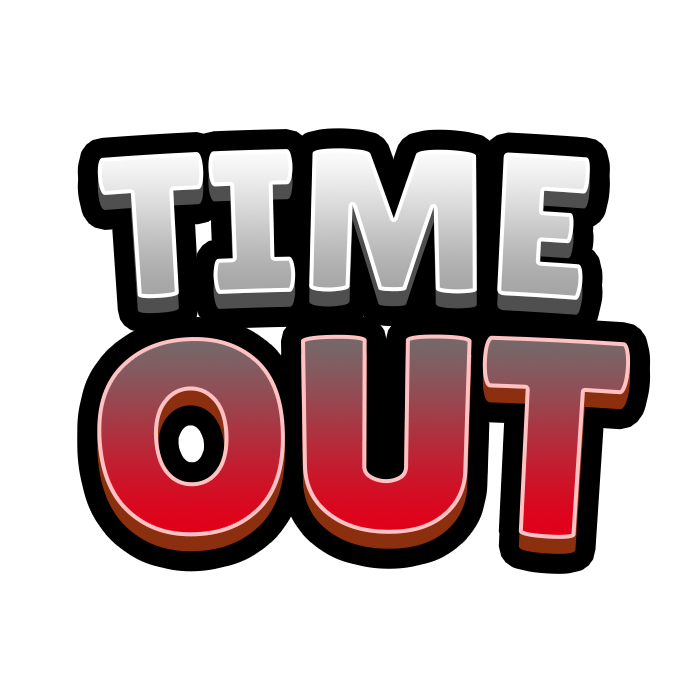
<style>
.page{position:relative;width:700px;height:700px;background:#ffffff}
.page>*{position:absolute;margin:0}
.t1{font:203.8px "LilitaOne"}
.t2{font:280.4px "LilitaOne"}
</style>
<div class="page">
<p class="t1" style="left:97px;top:148px;width:493px;height:152px">TIME</p>
<p class="t2" style="left:97px;top:334px;width:534px;height:205px">OUT</p>
</div>
